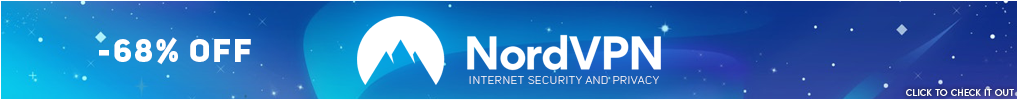
<style>
.page{position:relative;width:1018px;height:100px}
.page>*{position:absolute;margin:0}
.t1{font:31.8px "UniSansHeavyCAPS";letter-spacing:0.07em;color:#ffffff}
.t2{font:11.2px "UniSansThinCAPS";letter-spacing:0.07em;color:#ffffff}
.t3{font:8px "LEMONMILK-Light";letter-spacing:0.07em;color:#ffffff}
</style>
<div class="page">
<p class="t1" style="left:99px;top:37px;width:152px;height:28px">-68% OFF</p>
<p class="t2" style="left:469px;top:76px;width:190px;height:8px">INTERNET SECURITY AND PRIVACY</p>
<p class="t3" style="left:906px;top:89px;width:108px;height:7px">CLICK TO CHECK IT OUT</p>
</div>
